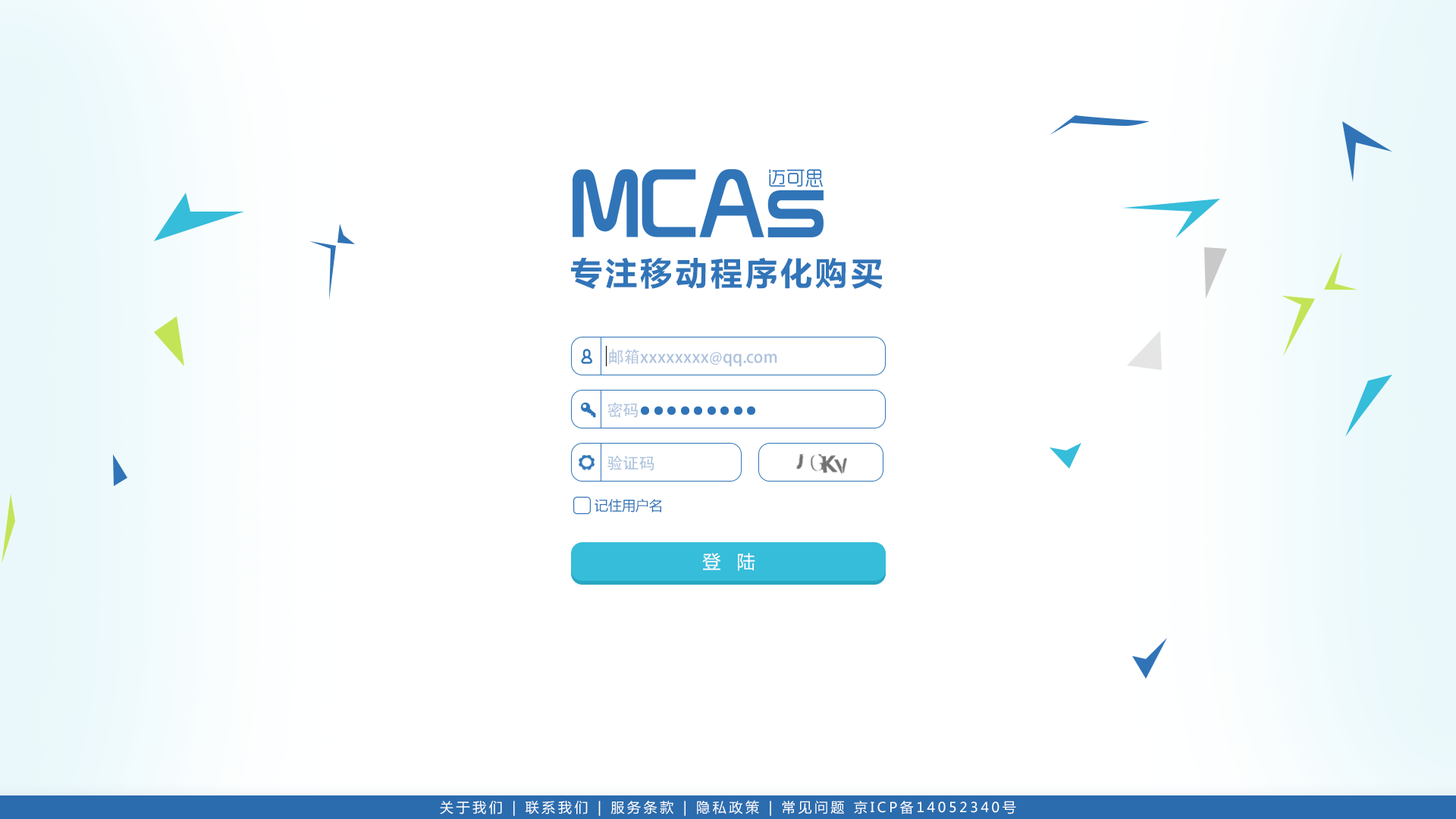
<style>
.page{position:relative;width:1456px;height:819px;background:#ffffff}
.page>*{position:absolute;margin:0}
.t1{font:31.8px "MicrosoftYaHei-Bold";letter-spacing:0.1em;color:#3175b8}
.t2{font:16px "AdobeHeitiStd-Regular";color:#acc1dd}
.t3{font:13.6px "MicrosoftYaHei";color:#3074b8}
.t4{font:18.2px "MicrosoftYaHei";color:#ffffff}
.t5{font:13.6px "MicrosoftYaHei";letter-spacing:0.2em;color:#ffffff}
</style>
<div class="page">
<p class="t1" style="left:571px;top:257px;width:312px;height:32px">专注移动程序化购买</p>
<p class="t2" style="left:609px;top:349px;width:168px;height:18px">邮箱xxxxxxxx@qq.com</p>
<p class="t2" style="left:607px;top:403px;width:31px;height:15px">密码</p>
<p class="t2" style="left:607px;top:455px;width:47px;height:16px">验证码</p>
<p class="t3" style="left:595px;top:499px;width:66px;height:14px">记住用户名</p>
<p class="t4" style="left:702px;top:553px;width:53px;height:18px">登   陆</p>
<p class="t5" style="left:440px;top:800px;width:576px;height:16px">关于我们 | 联系我们 | 服务条款 | 隐私政策 | 常见问题 京ICP备14052340号</p>
</div>
